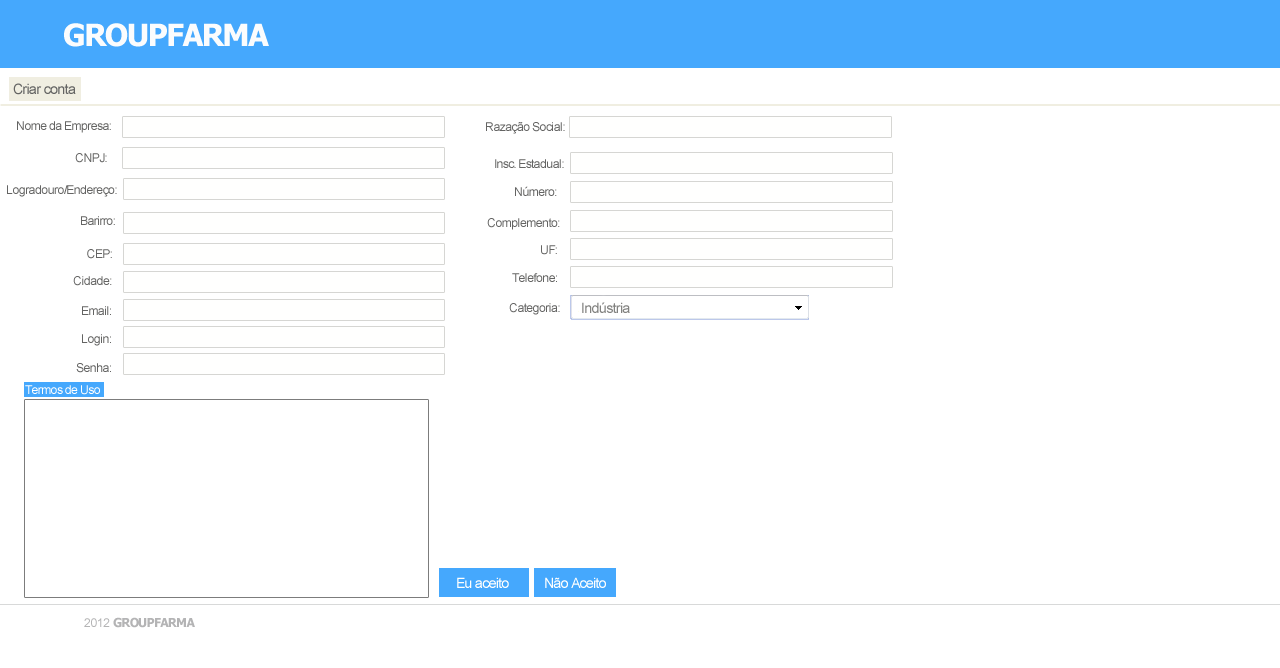
<style>
.page{position:relative;width:1280px;height:668px;background:#ffffff}
.page>*{position:absolute;margin:0}
.t1{font:30.5px "Tahoma-Bold";letter-spacing:-0.05em;color:#fbfcfd}
.t2{font:14.2px "ArialMT";letter-spacing:-0.05em;color:#646463}
.t3{font:12.2px "ArialMT";letter-spacing:-0.05em;color:#646463}
.t4{font:14.2px "ArialMT";letter-spacing:-0.05em;color:#828280}
.t5{font:12.2px "ArialMT";letter-spacing:-0.05em;color:#ffffff}
.t6{font:14.2px "ArialMT";letter-spacing:-0.05em;color:#fffffe}
.t7{font:12.2px "Tahoma-Bold";letter-spacing:-0.05em;color:#b4b4b5}
.t8{font:12.2px "ArialMT";letter-spacing:-0.05em;color:#b4b4b5}
</style>
<div class="page">
<p class="t1" style="left:64px;top:23px;width:205px;height:24px">GROUPFARMA</p>
<p class="t2" style="left:13px;top:83px;width:63px;height:12px">Criar conta</p>
<p class="t3" style="left:17px;top:121px;width:94px;height:12px">Nome da Empresa:</p>
<p class="t3" style="left:486px;top:122px;width:79px;height:12px">Razação Social:</p>
<p class="t3" style="left:75px;top:153px;width:32px;height:10px">CNPJ:</p>
<p class="t3" style="left:495px;top:159px;width:69px;height:9px">Insc. Estadual:</p>
<p class="t3" style="left:7px;top:185px;width:110px;height:12px">Logradouro/Endereço:</p>
<p class="t3" style="left:515px;top:186px;width:42px;height:10px">Número:</p>
<p class="t3" style="left:81px;top:216px;width:34px;height:9px">Barirro:</p>
<p class="t3" style="left:487px;top:218px;width:73px;height:12px">Complemento:</p>
<p class="t3" style="left:541px;top:245px;width:16px;height:10px">UF:</p>
<p class="t3" style="left:87px;top:249px;width:25px;height:10px">CEP:</p>
<p class="t3" style="left:73px;top:276px;width:39px;height:10px">Cidade:</p>
<p class="t3" style="left:512px;top:273px;width:45px;height:9px">Telefone:</p>
<p class="t3" style="left:509px;top:303px;width:51px;height:12px">Categoria:</p>
<p class="t4" style="left:582px;top:302px;width:48px;height:11px">Indústria</p>
<p class="t3" style="left:82px;top:306px;width:29px;height:9px">Email:</p>
<p class="t3" style="left:82px;top:334px;width:29px;height:12px">Login:</p>
<p class="t3" style="left:76px;top:363px;width:35px;height:10px">Senha:</p>
<p class="t5" style="left:25px;top:385px;width:75px;height:10px">Termos de Uso</p>
<p class="t6" style="left:457px;top:577px;width:52px;height:11px">Eu aceito</p>
<p class="t6" style="left:545px;top:577px;width:61px;height:11px">Não Aceito</p>
<p class="t7" style="left:84px;top:617px;width:111px;height:11px"><span class="t8">2012</span> GROUPFARMA</p>
</div>
